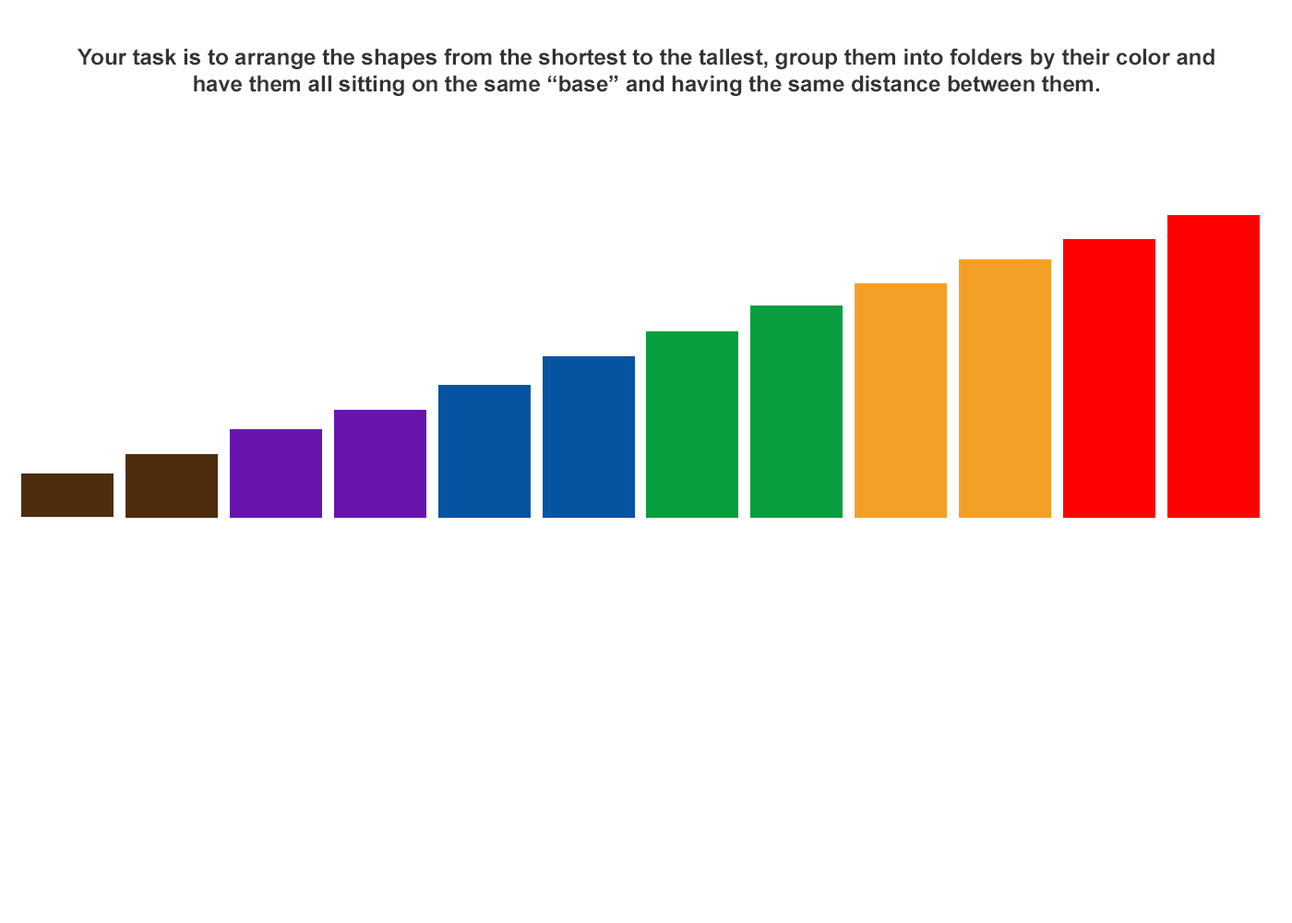
<style>
.page{position:relative;width:1292px;height:923px;background:#ffffff}
.page>*{position:absolute;margin:0}
.t1{font:22.1px "Arial-BoldMT";color:#333333}
</style>
<div class="page">
<p class="t1" style="left:78px;top:48px;width:1137px;height:48px;text-align:center">Your task is to arrange the shapes from the shortest to the tallest, group them into folders by their color and have them all sitting on the same “base” and having the same distance between them.</p>
</div>
